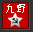
<style>
.page{position:relative;width:33px;height:32px;background:#c50000}
.page>*{position:absolute;margin:0}
.t1{font:10.4px "SimSun";color:#ffffff}
</style>
<div class="page">
<p class="t1" style="left:6px;top:4px;width:19px;height:9px">九野</p>
</div>
